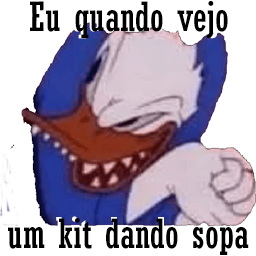
<style>
.page{position:relative;width:256px;height:256px;background:#ffffff}
.page>*{position:absolute;margin:0}
.t1{font:40px "Rockwell-Condensed";color:#000000}
</style>
<div class="page">
<p class="t1" style="left:30px;top:1px;width:198px;height:37px">Eu quando vejo</p>
<p class="t1" style="left:8px;top:218px;width:241px;height:37px">um kit dando sopa</p>
</div>
